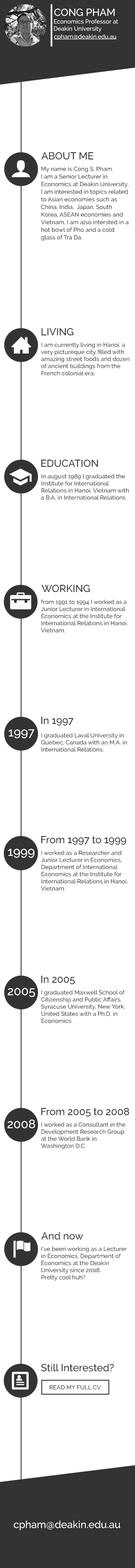
<style>
.page{position:relative;width:135px;height:1568px;background:#ffffff}
.page>*{position:absolute;margin:0}
.t1{font:10.1px "Raleway-Medium";color:#ffffff}
.t2{font:5.9px "Raleway-Medium";color:#ffffff}
.t3{font:10.1px "Raleway-Medium";color:#333333}
.t4{font:5.9px/7.6px "Raleway-Medium";color:#333333}
.t5{font:5.9px "Raleway-Medium";color:#333333}
.t6{font:12.2px "Raleway-Medium";color:#ffffff}
.t7{font:12.3px "Raleway-Medium";color:#ffffff}
</style>
<div class="page">
<p class="t1" style="left:54px;top:8px;width:61px;height:8px">CONG PHAM</p>
<p class="t2" style="left:54px;top:19px;width:64px;height:13px">Economics Professor at Deakin University</p>
<p class="t2" style="left:54px;top:34px;width:63px;height:6px">cpham@deakin.edu.au</p>
<p class="t3" style="left:41px;top:152px;width:52px;height:7px">ABOUT ME</p>
<p class="t4" style="left:41px;top:167px;width:88px;height:74px">My name is Cong S. Pham. <br>I am a Senior Lecturer in Economics at Deakin University,  <br>I am interested in topics related to Asian economies such as China, India,  Japan, South Korea, ASEAN economies and Vietnam, I am also intersted in a hot bowl of Pho and a cold glass of Tra Da.</p>
<p class="t3" style="left:41px;top:328px;width:33px;height:7px">LIVING</p>
<p class="t5" style="left:41px;top:343px;width:89px;height:33px">I am currently living in Hanoi, a very pictureque city filled with amazing street foods and dozen of ancient buildings from the French colonial era.</p>
<p class="t3" style="left:41px;top:459px;width:57px;height:8px">EDUCATION</p>
<p class="t5" style="left:41px;top:474px;width:88px;height:26px">In august 1989 I graduated the Institute for International Relations in Hanoi, Vietnam with a B.A. in International Relations</p>
<p class="t3" style="left:41px;top:584px;width:49px;height:8px">WORKING</p>
<p class="t5" style="left:41px;top:600px;width:87px;height:33px">from 1991 to 1994 I worked as a Junior Lecturer in International Economics at the Institute for International Relations in Hanoi, Vietnam.</p>
<p class="t3" style="left:41px;top:717px;width:33px;height:9px">In 1997</p>
<p class="t6" style="left:8px;top:729px;width:27px;height:9px">1997</p>
<p class="t5" style="left:41px;top:733px;width:86px;height:19px">I graduated Laval University in Quebec, Canada with an M.A. in International Relations.</p>
<p class="t3" style="left:41px;top:836px;width:85px;height:9px">From 1997 to 1999</p>
<p class="t7" style="left:8px;top:849px;width:27px;height:9px">1999</p>
<p class="t5" style="left:41px;top:850px;width:87px;height:41px">I worked as a Researcher and Junior Lecturer in Economics, Department of International Economics at the Institute for International Relations in Hanoi, Vietnam.</p>
<p class="t3" style="left:41px;top:976px;width:34px;height:8px">In 2005</p>
<p class="t6" style="left:8px;top:988px;width:27px;height:9px">2005</p>
<p class="t5" style="left:41px;top:990px;width:84px;height:33px">I graduated Maxwell School of Citizenship and Public Affairs, Syracuse University, New York, United States with a Ph.D. in Economics.</p>
<p class="t3" style="left:41px;top:1108px;width:88px;height:9px">From 2005 to 2008</p>
<p class="t6" style="left:7px;top:1119px;width:28px;height:10px">2008</p>
<p class="t5" style="left:41px;top:1122px;width:85px;height:27px">I worked as a Consultant in the Development Research Group at the World Bank in Washington D.C.</p>
<p class="t3" style="left:41px;top:1232px;width:43px;height:8px">And now</p>
<p class="t5" style="left:41px;top:1247px;width:86px;height:34px">I've been working as a Lecturer in Economics, Department of Economics at the Deakin University since 2008. <br>Pretty cool huh?</p>
<p class="t3" style="left:41px;top:1364px;width:73px;height:7px">Still Interested?</p>
<p class="t5" style="left:50px;top:1385px;width:51px;height:5px">READ MY FULL CV</p>
<p class="t1" style="left:14px;top:1521px;width:107px;height:9px">cpham@deakin.edu.au</p>
</div>
